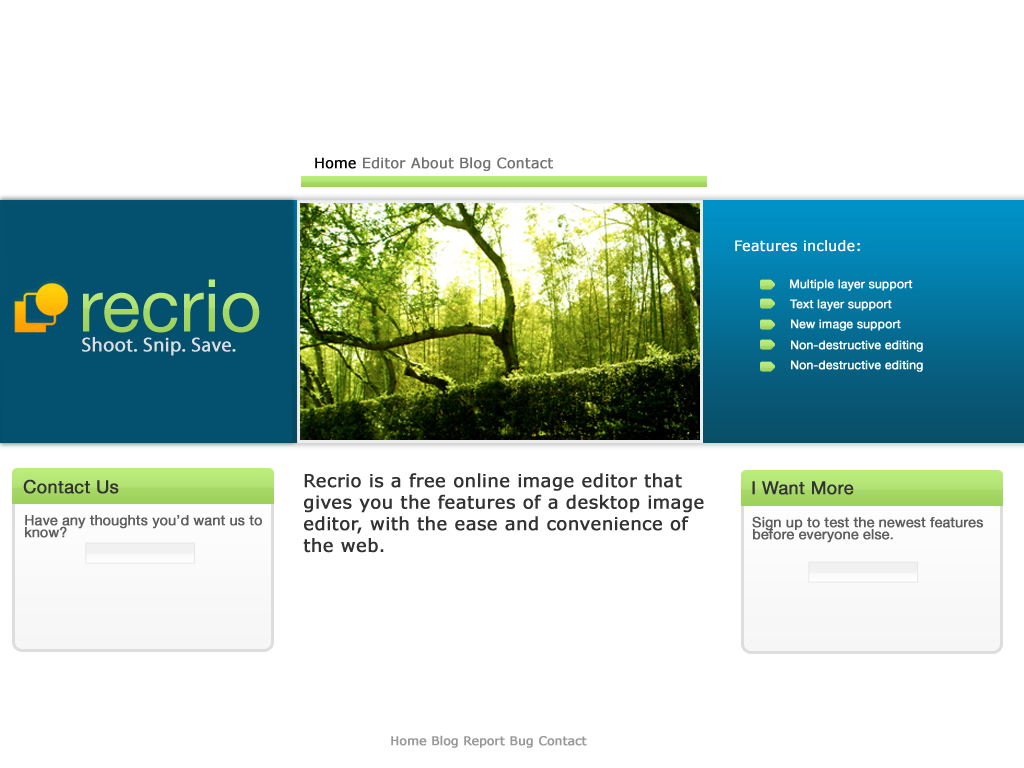
<style>
.page{position:relative;width:1024px;height:768px;background:#ffffff}
.page>*{position:absolute;margin:0}
.t1{font:14px "Verdana";color:#727272;font-weight:bold}
.t2{font:14px "Verdana";color:#030303;font-weight:bold}
.t3{font:14px "Verdana";color:#ffffff;font-weight:bold}
.t4{font:12px "HelveticaNeue";color:#ffffff;font-weight:bold}
.t5{font:20px "MyriadPro-Regular";color:#dedcdc;font-weight:bold}
.t6{font:18px "Verdana";color:#333333;font-weight:bold}
.t7{font:18px "HelveticaNeue";color:#333333;font-weight:bold}
.t8{font:14px/12px "HelveticaNeue";color:#5e5e5e;font-weight:bold}
.t9{font:12px "Verdana";color:#999999;font-weight:bold}
</style>
<div class="page">
<p class="t1" style="left:315px;top:157px;width:238px;height:14px"><span class="t2">Home </span>Editor About Blog Contact</p>
<p class="t3" style="left:735px;top:240px;width:125px;height:12px">Features include:</p>
<p class="t4" style="left:790px;top:279px;width:123px;height:12px">Multiple layer support</p>
<p class="t4" style="left:790px;top:299px;width:102px;height:12px">Text layer support</p>
<p class="t4" style="left:791px;top:319px;width:110px;height:12px">New image support</p>
<p class="t5" style="left:82px;top:337px;width:154px;height:19px">Shoot. Snip. Save.</p>
<p class="t4" style="left:791px;top:340px;width:132px;height:12px">Non-destructive editing</p>
<p class="t4" style="left:791px;top:360px;width:132px;height:12px">Non-destructive editing</p>
<p class="t6" style="left:303px;top:473px;width:401px;height:80px">Recrio is a free online image editor that gives you the features of a desktop image editor, with the ease and convenience of the web.</p>
<p class="t7" style="left:23px;top:479px;width:96px;height:15px">Contact Us</p>
<p class="t7" style="left:752px;top:481px;width:102px;height:14px">I Want More</p>
<p class="t8" style="left:25px;top:515px;width:237px;height:23px">Have any thoughts you’d want us to<br>know?</p>
<p class="t8" style="left:752px;top:516px;width:231px;height:27px">Sign up to test the newest features<br>before everyone else.</p>
<p class="t9" style="left:391px;top:735px;width:196px;height:13px">Home Blog Report Bug Contact</p>
</div>
